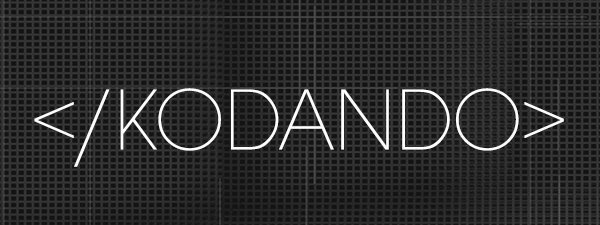
<style>
.page{position:relative;width:600px;height:225px}
.page>*{position:absolute;margin:0}
.t1{font:89.7px "AvantGardeExtLitITCTT";color:#ffffff}
</style>
<div class="page">
<p class="t1" style="left:34px;top:88px;width:530px;height:79px">&lt;/KODANDO&gt;</p>
</div>
